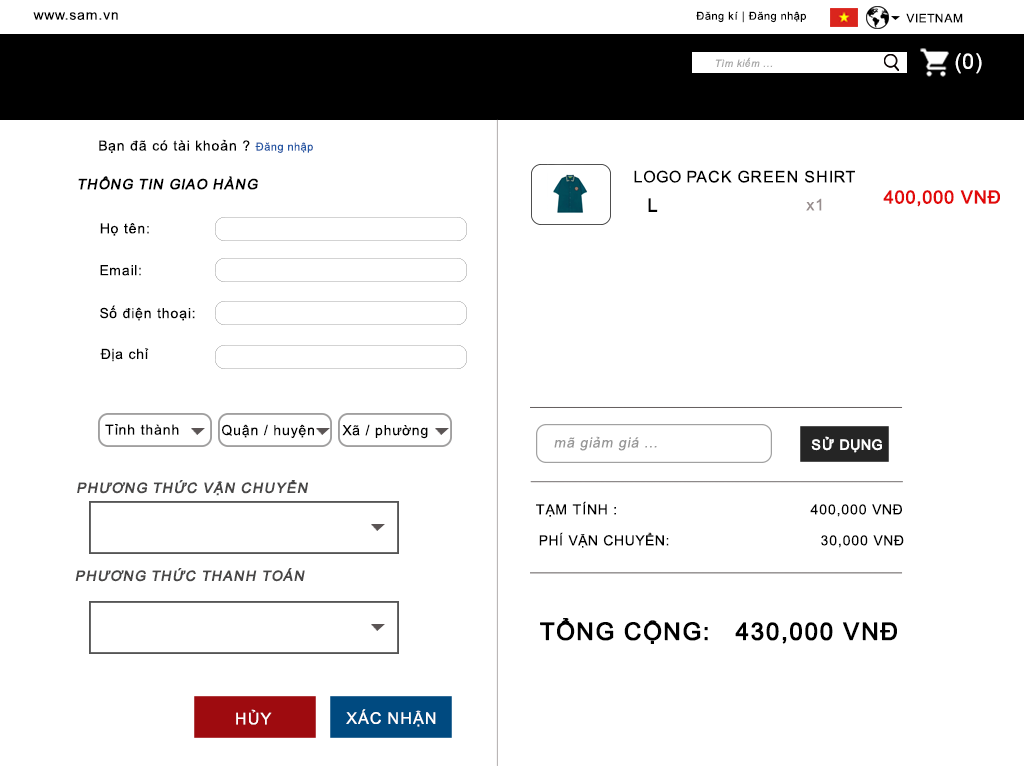
<style>
.page{position:relative;width:1024px;height:768px;background:#ffffff}
.page>*{position:absolute;margin:0}
.t1{font:14px "ArialMT";letter-spacing:0.05em;color:#000000}
.t2{font:11px "ArialMT";letter-spacing:0.05em;color:#000000}
.t3{font:12px "ArialMT";letter-spacing:0.05em;color:#000000}
.t4{font:21px "ArialMT";letter-spacing:0.05em;color:#ffffff}
.t5{font:10px "Arial-ItalicMT";letter-spacing:0.05em;color:#a7a7a7}
.t6{font:11px "ArialMT";letter-spacing:0.05em;color:#2357a5}
.t7{font:16px "ArialMT";letter-spacing:0.05em;color:#000000}
.t8{font:14px "ArialMT";letter-spacing:0.05em;color:#000000;font-weight:bold;font-style:italic}
.t9{font:18px "ArialMT";letter-spacing:0.05em;color:#000000;font-weight:bold}
.t10{font:16px "ArialMT";letter-spacing:0.05em;color:#988e8e}
.t11{font:18px "ArialMT";letter-spacing:0.05em;color:#e20909;font-weight:bold}
.t12{font:14px "ArialMT";letter-spacing:0.05em;color:#979797;font-style:italic}
.t13{font:14px "ArialMT";letter-spacing:0.05em;color:#ffffff;font-weight:bold}
.t14{font:14px "ArialMT";letter-spacing:0.05em;color:#484747;font-weight:bold;font-style:italic}
.t15{font:24px "ArialMT";letter-spacing:0.05em;color:#000000;font-weight:bold}
.t16{font:16px "ArialMT";letter-spacing:0.05em;color:#ffffff}
</style>
<div class="page">
<p class="t1" style="left:33px;top:12px;width:85px;height:8px">www.sam.vn</p>
<p class="t2" style="left:696px;top:11px;width:110px;height:12px">Đăng kí | Đăng nhập</p>
<p class="t3" style="left:906px;top:13px;width:57px;height:10px">VIETNAM</p>
<p class="t4" style="left:955px;top:53px;width:27px;height:21px">(0)</p>
<p class="t5" style="left:715px;top:57px;width:58px;height:10px">Tìm kiếm ...</p>
<p class="t1" style="left:99px;top:139px;width:214px;height:14px">Bạn đã có tài khoản ? <span class="t6">Đăng nhập</span></p>
<p class="t7" style="left:634px;top:170px;width:221px;height:13px">LOGO PACK GREEN SHIRT</p>
<p class="t8" style="left:78px;top:176px;width:180px;height:14px">THÔNG TIN GIAO HÀNG</p>
<p class="t9" style="left:648px;top:198px;width:10px;height:14px">L</p>
<p class="t10" style="left:806px;top:198px;width:16px;height:13px">x1</p>
<p class="t11" style="left:883px;top:190px;width:117px;height:17px">400,000 VNĐ</p>
<p class="t1" style="left:100px;top:223px;width:49px;height:13px">Họ tên:</p>
<p class="t1" style="left:100px;top:265px;width:41px;height:11px">Email:</p>
<p class="t1" style="left:100px;top:305px;width:95px;height:16px">Số điện thoại:</p>
<p class="t1" style="left:100px;top:348px;width:49px;height:14px">Địa chỉ</p>
<p class="t1" style="left:105px;top:424px;width:74px;height:11px">Tỉnh thành</p>
<p class="t1" style="left:222px;top:424px;width:92px;height:15px">Quận / huyện</p>
<p class="t1" style="left:342px;top:424px;width:86px;height:15px">Xã / phường</p>
<p class="t12" style="left:554px;top:436px;width:103px;height:15px">mã giảm giá ...</p>
<p class="t13" style="left:811px;top:436px;width:71px;height:17px">SỬ DỤNG</p>
<p class="t14" style="left:77px;top:480px;width:231px;height:16px">PHƯƠNG THỨC VẬN CHUYỂN</p>
<p class="t1" style="left:536px;top:501px;width:366px;height:16px">TẠM TÍNH :                                         400,000 VNĐ</p>
<p class="t1" style="left:539px;top:532px;width:365px;height:16px">PHÍ VẬN CHUYỂN:                                30,000 VNĐ</p>
<p class="t14" style="left:75px;top:568px;width:230px;height:14px">PHƯƠNG THỨC THANH TOÁN</p>
<p class="t15" style="left:540px;top:618px;width:357px;height:26px">TỔNG CỘNG:   430,000 VNĐ</p>
<p class="t16" style="left:236px;top:709px;width:36px;height:16px">HỦY</p>
<p class="t16" style="left:346px;top:709px;width:90px;height:18px">XÁC NHẬN</p>
</div>
